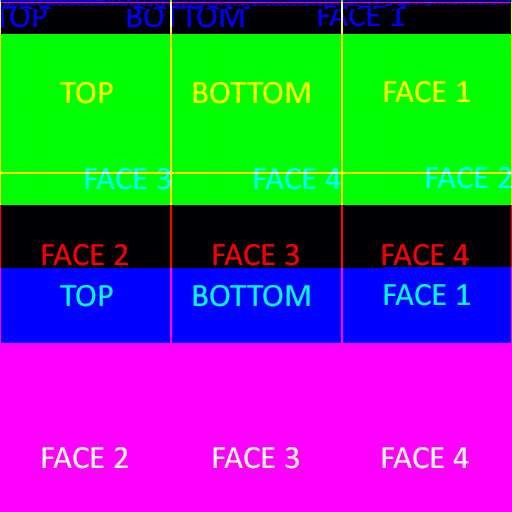
<style>
.page{position:relative;width:512px;height:512px;background:#ff00ff}
.page>*{position:absolute;margin:0}
.t1{font:33px "Calibri"}
</style>
<div class="page">
<p class="t1" style="left:60px;top:80px;width:53px;height:22px">TOP</p>
<p class="t1" style="left:193px;top:80px;width:117px;height:22px">BOTTOM</p>
<p class="t1" style="left:384px;top:79px;width:86px;height:22px">FACE 1</p>
<p class="t1" style="left:42px;top:242px;width:86px;height:22px">FACE 2</p>
<p class="t1" style="left:213px;top:242px;width:86px;height:22px">FACE 3</p>
<p class="t1" style="left:382px;top:242px;width:87px;height:22px">FACE 4</p>
</div>
